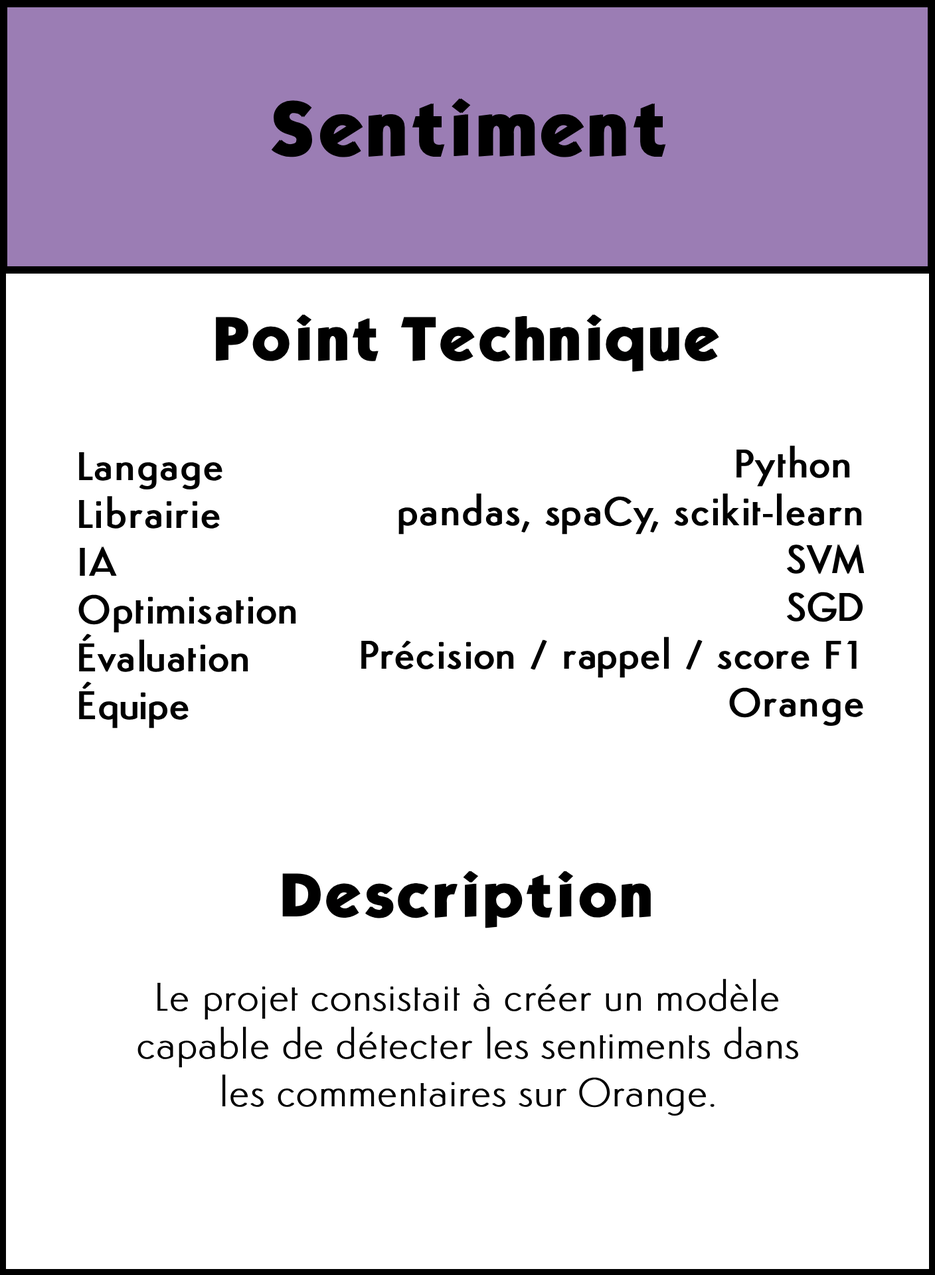
<style>
.page{position:relative;width:935px;height:1275px;background:#ffffff}
.page>*{position:absolute;margin:0}
.t1{font:66.4px "KabelBdNormal";color:#000000;font-weight:bold}
.t2{font:53.1px "KabelBdNormal";color:#000000;font-weight:bold}
.t3{font:39.8px "Semplicita-Medium";color:#000000;font-weight:bold}
.t4{font:39.8px "Semplicita-Light";color:#000000;font-weight:bold}
</style>
<div class="page">
<p class="t1" style="left:271px;top:98px;width:395px;height:59px">Sentiment</p>
<p class="t2" style="left:216px;top:314px;width:503px;height:58px">Point Technique</p>
<p class="t3" style="left:361px;top:446px;width:504px;height:280px;text-align:right">Python<br>pandas, spaCy, scikit-learn <br>SVM<br>SGD<br>Précision / rappel / score F1<br>Orange</p>
<p class="t3" style="left:78px;top:452px;width:218px;height:277px">Langage<br>Librairie<br>IA<br>Optimisation<br>Évaluation<br>Équipe</p>
<p class="t2" style="left:282px;top:871px;width:369px;height:57px">Description</p>
<p class="t4" style="left:137px;top:979px;width:661px;height:137px;text-align:center">Le projet consistait à créer un modèle capable de détecter les sentiments dans les commentaires sur Orange.</p>
</div>
